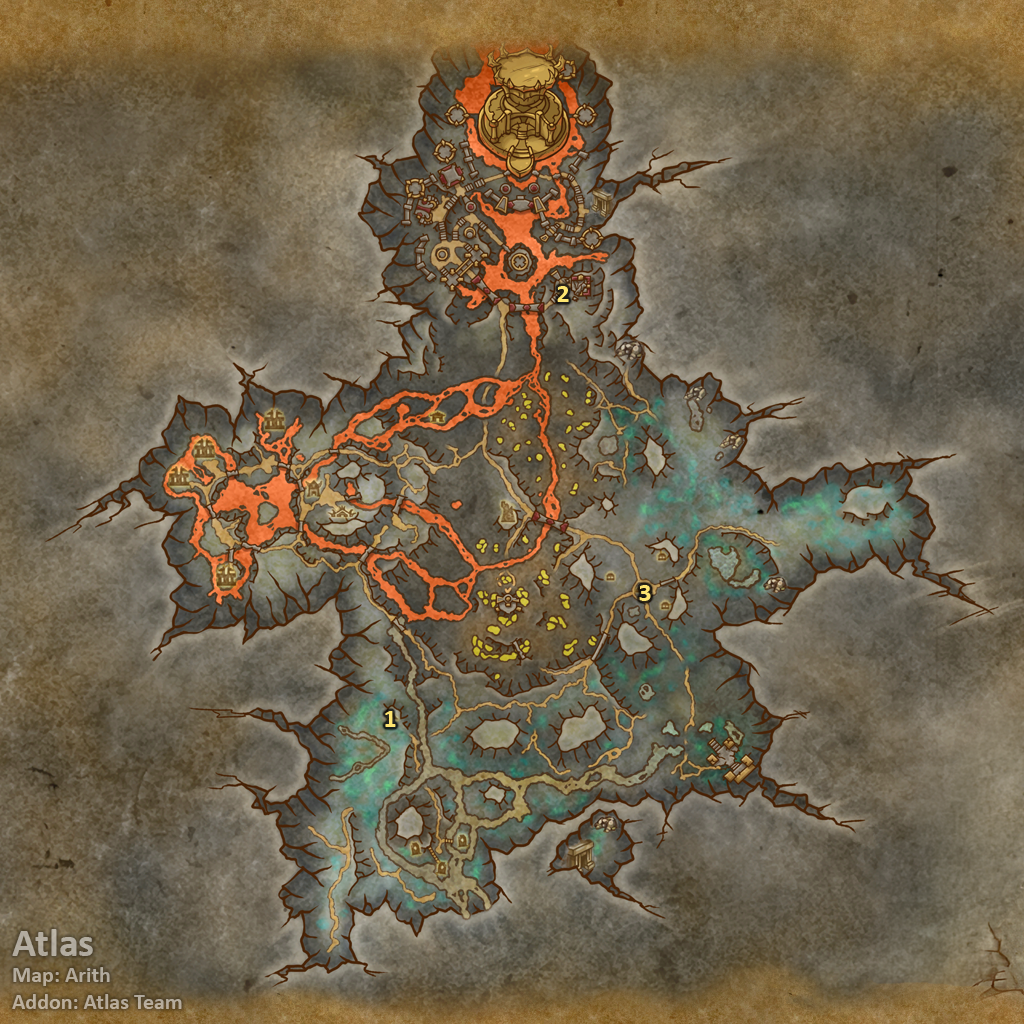
<style>
.page{position:relative;width:1024px;height:1024px}
.page>*{position:absolute;margin:0}
.t1{font:26px "Calibri-Bold";color:#fee570}
.t2{font:22px "Calibri-Bold";color:#b4ac9e}
.t3{font:40px "Calibri-Bold";color:#b4ac9e}
</style>
<div class="page">
<p class="t1" style="left:557px;top:286px;width:12px;height:16px">2</p>
<p class="t1" style="left:639px;top:585px;width:12px;height:16px">3</p>
<p class="t1" style="left:385px;top:711px;width:11px;height:16px">1</p>
<p class="t2" style="left:12px;top:929px;width:170px;height:80px"><span class="t3">Atlas<br></span>Map: Arith<br>Addon: Atlas Team</p>
</div>
